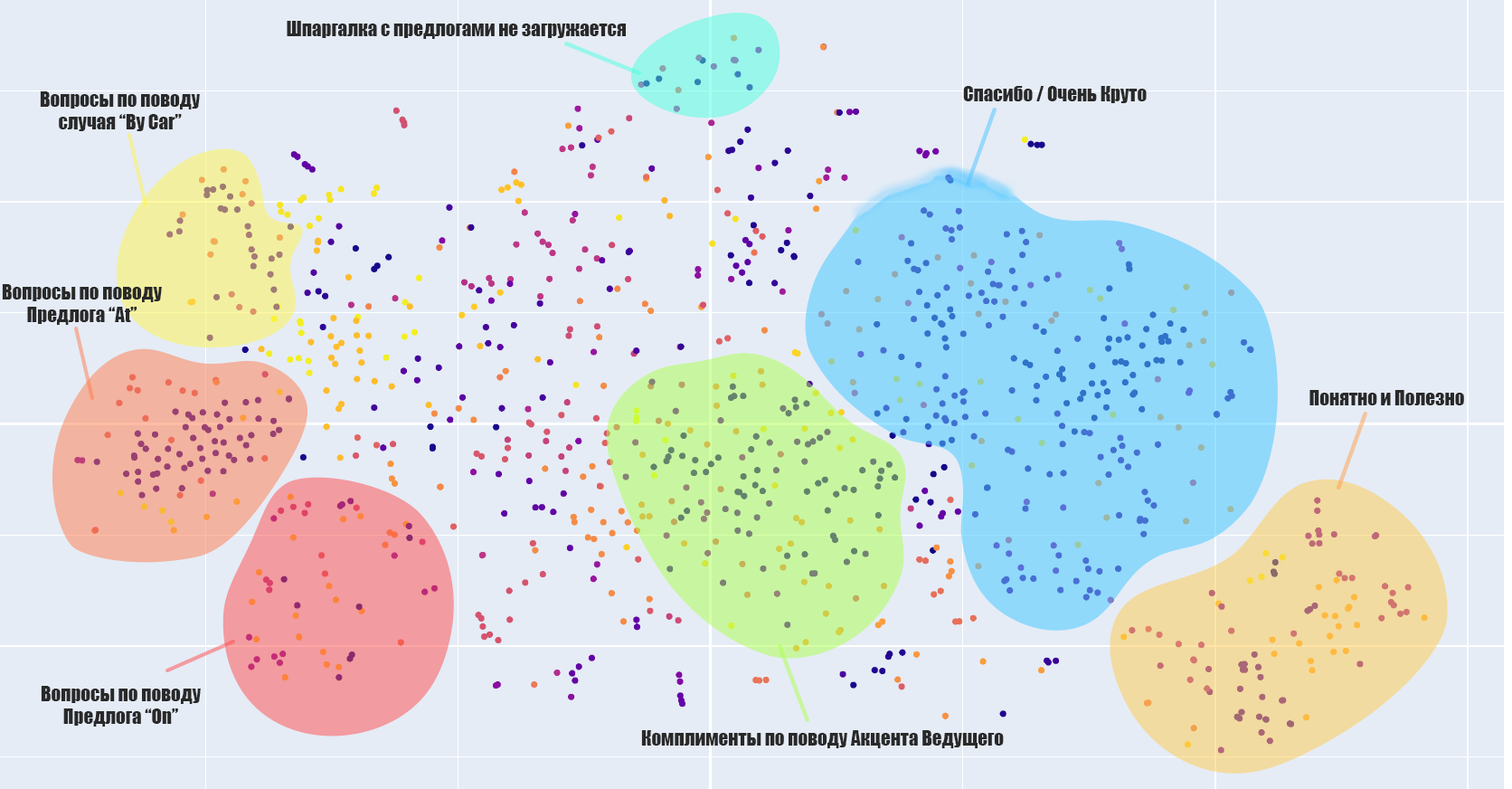
<style>
.page{position:relative;width:1512px;height:789px;background:#e5ecf6}
.page>*{position:absolute;margin:0}
.t1{font:19px "Impact";color:#292929}
</style>
<div class="page">
<p class="t1" style="left:287px;top:21px;width:339px;height:18px">Шпаргалка с предлогами не загружается</p>
<p class="t1" style="left:963px;top:86px;width:184px;height:17px">Спасибо / Очень Круто</p>
<p class="t1" style="left:40px;top:91px;width:160px;height:40px;text-align:center">Вопросы по поводу<br>случая “By Car”</p>
<p class="t1" style="left:2px;top:284px;width:160px;height:41px;text-align:center">Вопросы по поводу<br>Предлога “At”</p>
<p class="t1" style="left:1310px;top:390px;width:154px;height:15px">Понятно и Полезно</p>
<p class="t1" style="left:41px;top:686px;width:160px;height:40px;text-align:center">Вопросы по поводу<br>Предлога “On”</p>
<p class="t1" style="left:641px;top:730px;width:363px;height:18px">Комплименты по поводу Акцента Ведущего</p>
</div>
